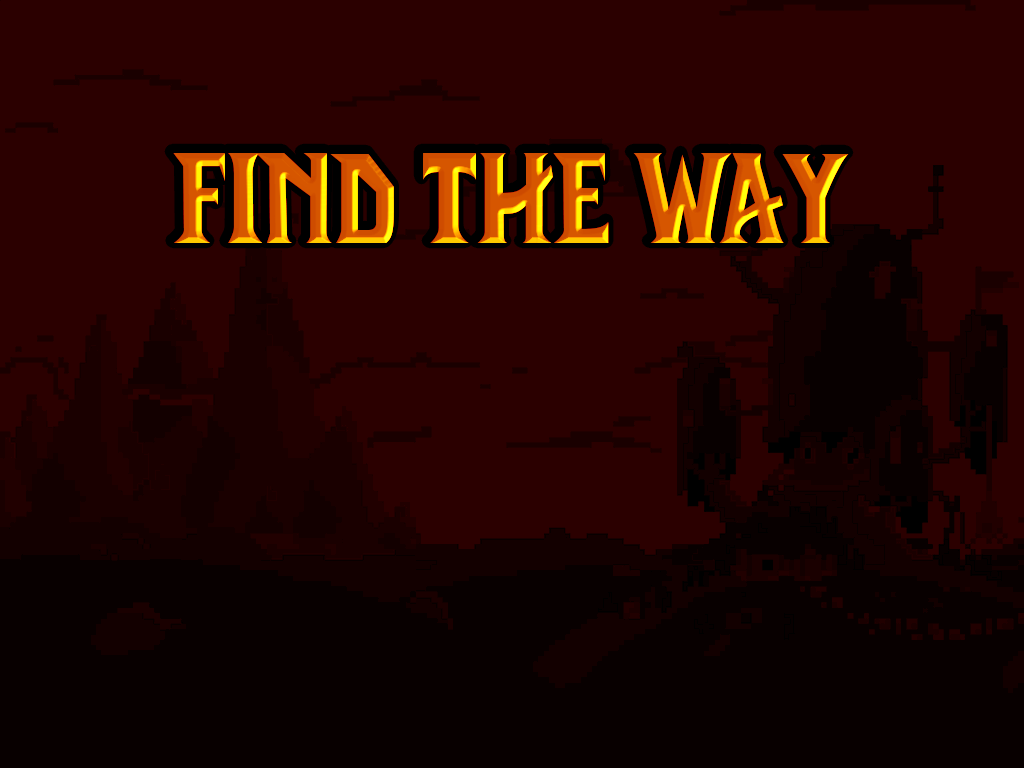
<style>
.page{position:relative;width:1024px;height:768px;background:#2b0000}
.page>*{position:absolute;margin:0}
.t1{font:127.8px "LifeCraft"}
</style>
<div class="page">
<p class="t1" style="left:173px;top:153px;width:676px;height:90px">FIND THE WAY</p>
</div>
